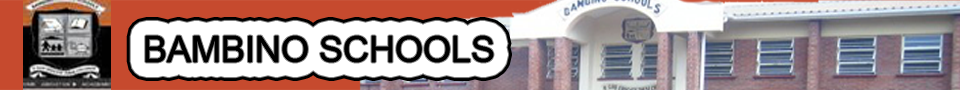
<style>
.page{position:relative;width:960px;height:90px}
.page>*{position:absolute;margin:0}
.t1{font:36px "ArialMT";color:#000000}
</style>
<div class="page">
<p class="t1" style="left:145px;top:36px;width:348px;height:26px">BAMBINO SCHOOLS</p>
</div>
